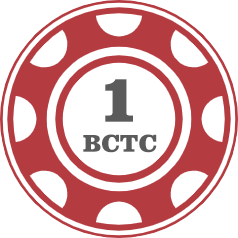
<style>
.page{position:relative;width:238px;height:238px;background:#ffffff}
.page>*{position:absolute;margin:0}
.t1{font:70px "ClarendonBT-Black";color:#5b5b5b}
.t2{font:25px "ClarendonBT-Black";color:#5b5b5b}
</style>
<div class="page">
<p class="t1" style="left:105px;top:79px;width:28px;height:43px">1</p>
<p class="t2" style="left:83px;top:134px;width:74px;height:19px">BCTC</p>
</div>
